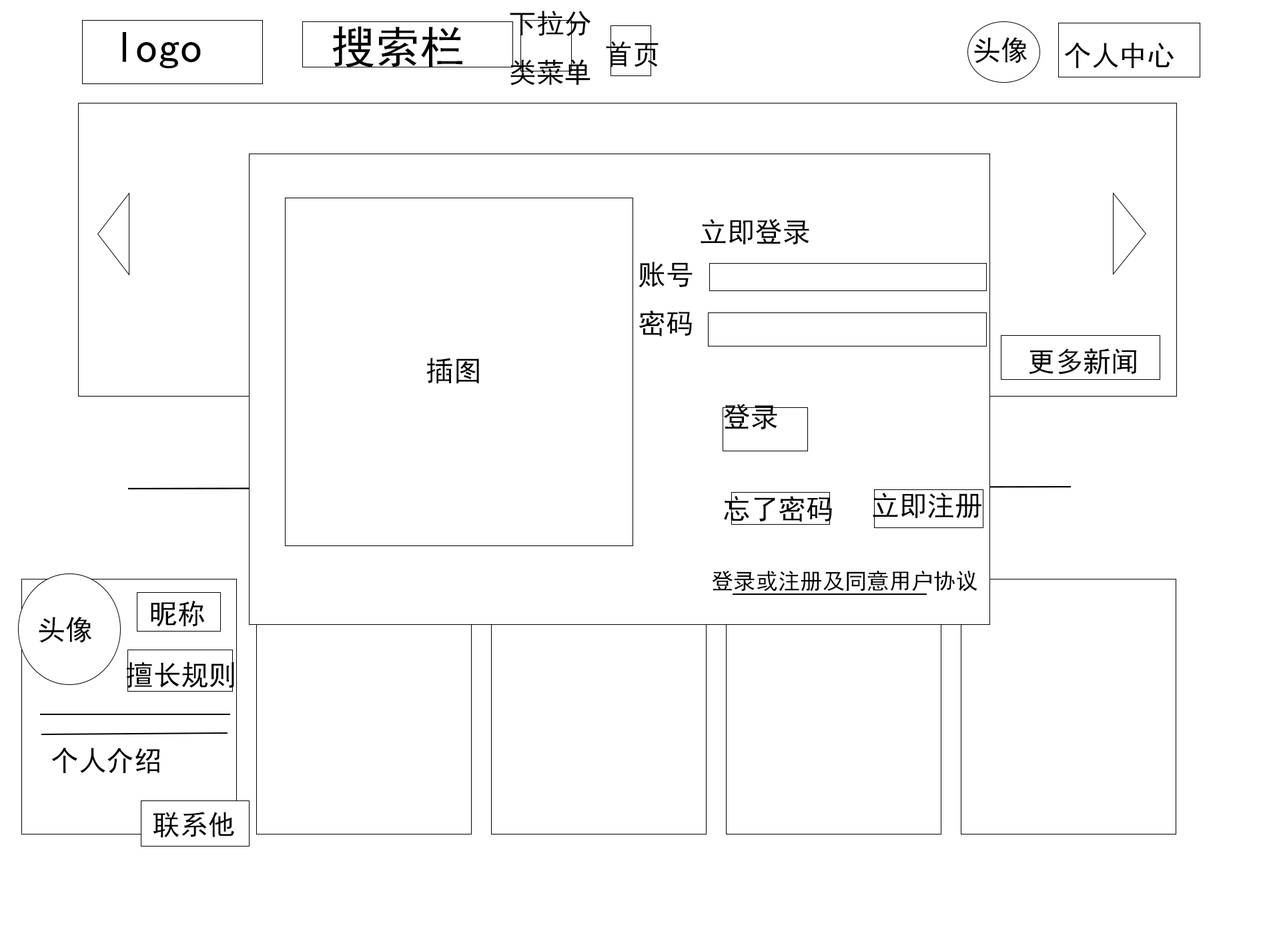
<style>
.page{position:relative;width:1261px;height:946px;background:#ffffff}
.page>*{position:absolute;margin:0}
.t1{font:27.8px "SimHei";color:#000000}
.t2{font:44.5px "SimHei";color:#000000}
.t3{font:22.2px "SimHei";color:#000000}
</style>
<div class="page">
<p class="t1" style="left:510px;top:11px;width:81px;height:74px">下拉分<br>类菜单</p>
<p class="t2" style="left:332px;top:26px;width:130px;height:41px">搜索栏</p>
<p class="t2" style="left:122px;top:32px;width:79px;height:37px">logo</p>
<p class="t1" style="left:606px;top:41px;width:53px;height:26px">首页</p>
<p class="t1" style="left:974px;top:37px;width:54px;height:26px">头像</p>
<p class="t1" style="left:1064px;top:42px;width:110px;height:26px">个人中心</p>
<p class="t1" style="left:701px;top:218px;width:108px;height:27px">立即登录</p>
<p class="t1" style="left:639px;top:262px;width:54px;height:74px">账号<br>密码</p>
<p class="t1" style="left:1029px;top:348px;width:107px;height:26px">更多新闻</p>
<p class="t1" style="left:426px;top:358px;width:53px;height:26px">插图</p>
<p class="t1" style="left:724px;top:403px;width:53px;height:27px">登录</p>
<p class="t1" style="left:724px;top:495px;width:108px;height:27px">忘了密码</p>
<p class="t1" style="left:873px;top:492px;width:109px;height:26px">立即注册</p>
<p class="t3" style="left:712px;top:570px;width:266px;height:21px">登录或注册及同意用户协议</p>
<p class="t1" style="left:151px;top:600px;width:54px;height:27px">昵称</p>
<p class="t1" style="left:39px;top:616px;width:53px;height:27px">头像</p>
<p class="t1" style="left:126px;top:661px;width:108px;height:27px">擅长规则</p>
<p class="t1" style="left:51px;top:747px;width:109px;height:26px">个人介绍</p>
<p class="t1" style="left:153px;top:811px;width:81px;height:26px">联系他</p>
</div>
